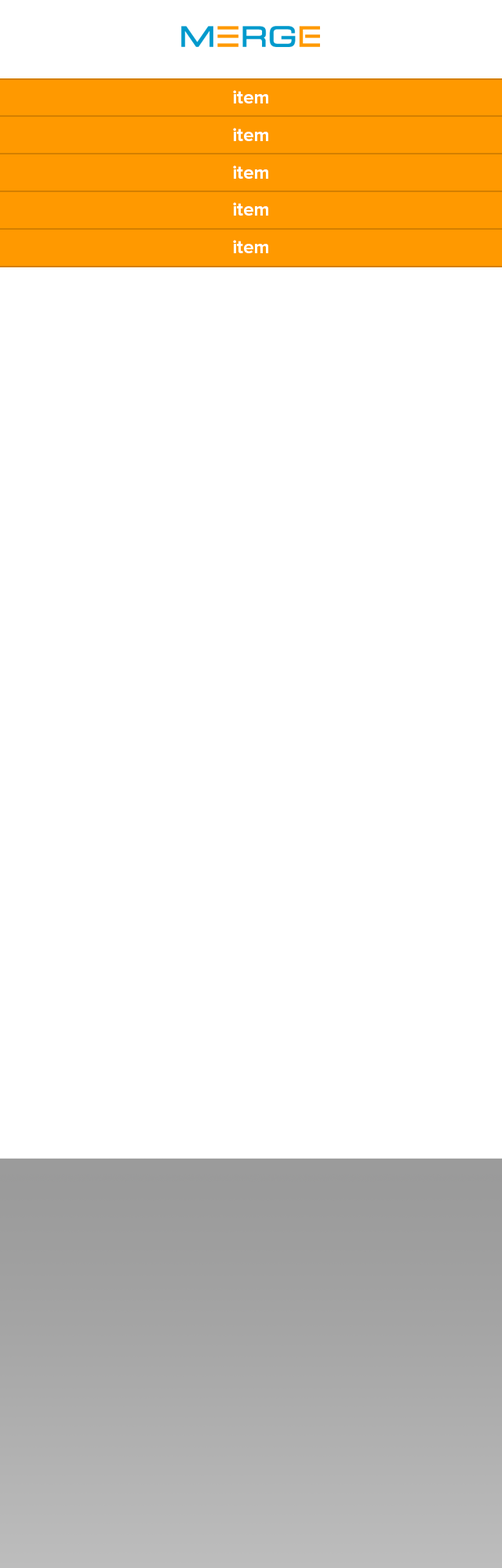
<style>
.page{position:relative;width:502px;height:1568px;background:#ffffff}
.page>*{position:absolute;margin:0}
.t1{font:18.8px "ProximaNova-Bold";color:#ffffff}
</style>
<div class="page">
<p class="t1" style="left:233px;top:90px;width:35px;height:13px">item</p>
<p class="t1" style="left:233px;top:128px;width:35px;height:13px">item</p>
<p class="t1" style="left:233px;top:165px;width:35px;height:14px">item</p>
<p class="t1" style="left:233px;top:202px;width:35px;height:14px">item</p>
<p class="t1" style="left:233px;top:240px;width:35px;height:13px">item</p>
</div>
